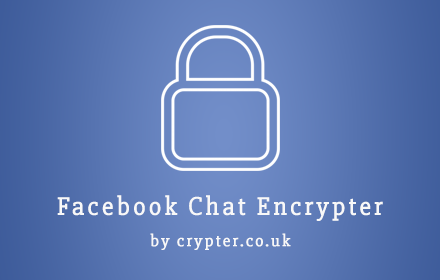
<style>
.page{position:relative;width:440px;height:280px}
.page>*{position:absolute;margin:0}
.t1{font:6.3px/34.8px "Slabo27px-Regular";letter-spacing:0.1em;color:#f8f8f8;font-weight:bold}
.t2{font:16.8px "Slabo27px-Regular";letter-spacing:0.1em;color:#f8f8f8;font-weight:bold}
</style>
<div class="page">
<p class="t1" style="left:57px;top:195px;width:326px;height:26px;text-align:center">Facebook Chat Encrypter</p>
<p class="t2" style="left:150px;top:233px;width:141px;height:17px">by crypter.co.uk</p>
</div>
